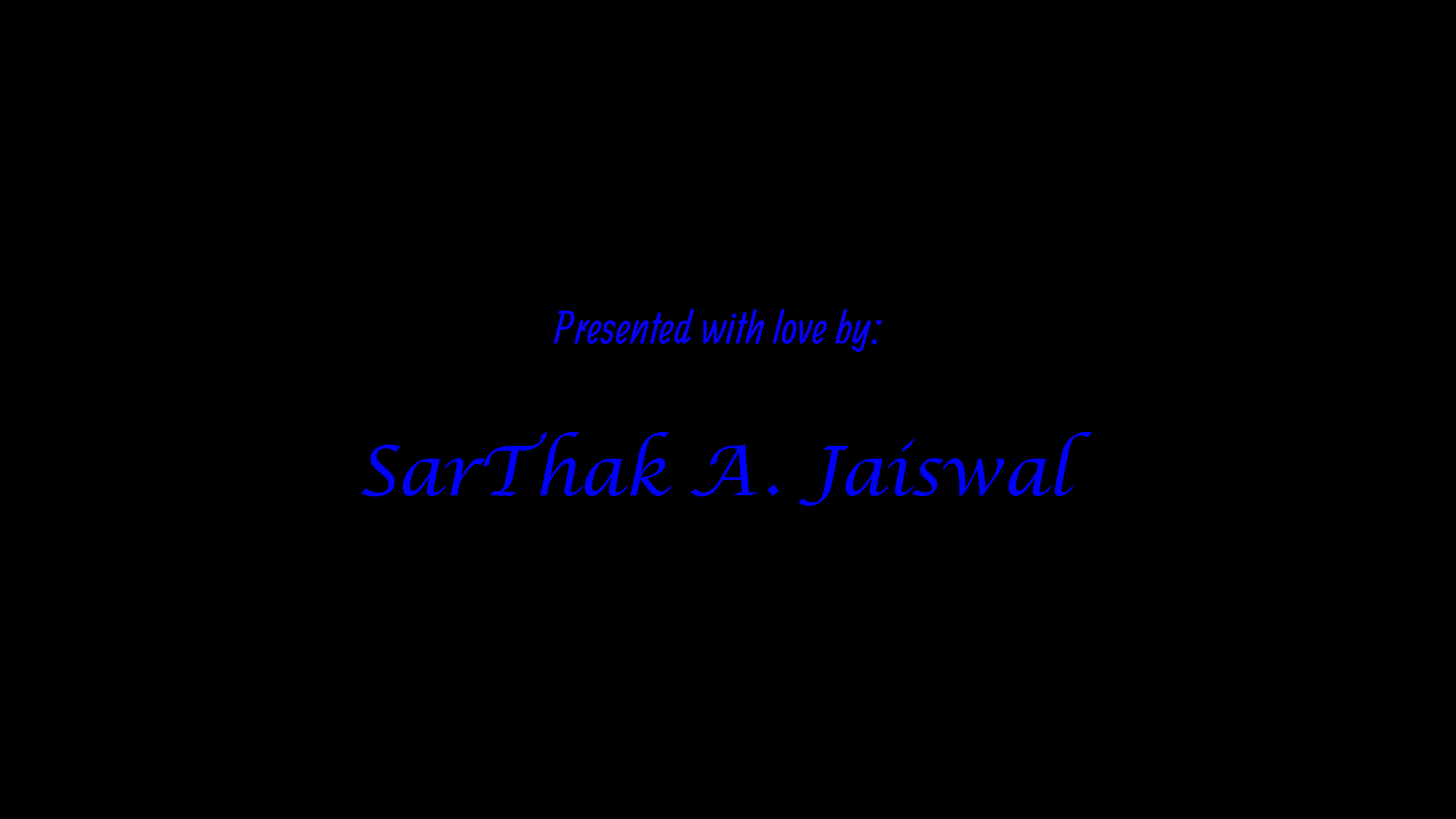
<style>
.page{position:relative;width:1456px;height:819px;background:#000000}
.page>*{position:absolute;margin:0}
.t1{font:45.5px/151.7px "Allan-Regular";color:#0800ff}
.t2{font:68.2px/151.7px "LucidaCalligraphy-Regular";color:#0000ff}
</style>
<div class="page">
<p class="t1" style="left:361px;top:309px;width:732px;height:198px;text-align:center">Presented with love by: <br><span class="t2">SarThak A. Jaiswal</span></p>
</div>
